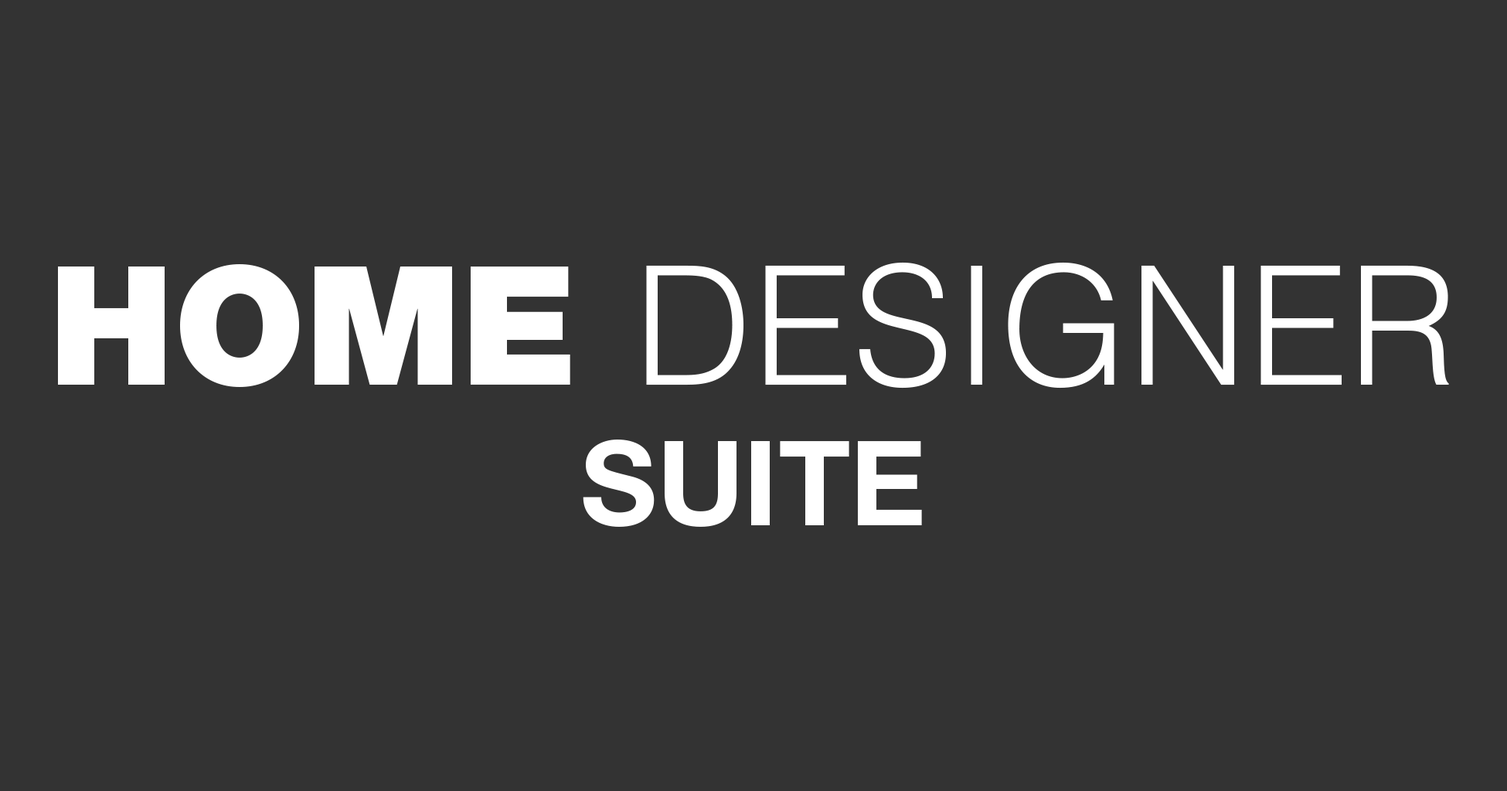
<style>
.page{position:relative;width:1507px;height:791px;background:#333333}
.page>*{position:absolute;margin:0}
.t1{font:165.1px "Helvetica-Light";color:#ffffff}
.t2{font:165.1px "HelveticaNeueLTStd-Blk";color:#ffffff}
.t3{font:117.7px "HelveticaNeueLTStd-Bd";color:#ffffff}
</style>
<div class="page">
<p class="t1" style="left:58px;top:262px;width:1391px;height:265px;text-align:center"><span class="t2">HOME </span>DESIGNER<br><span class="t3">SUITE</span></p>
</div>
